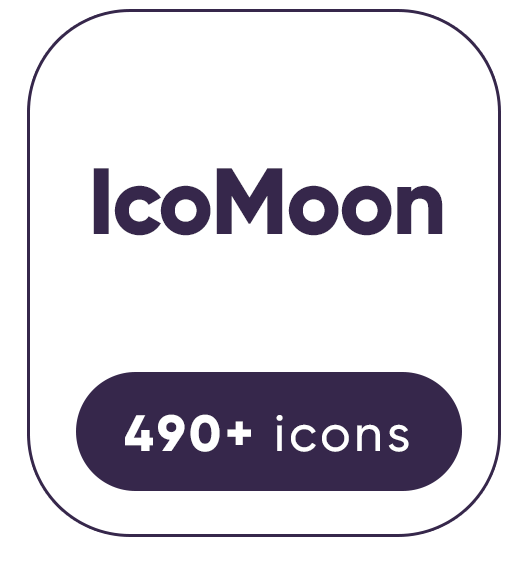
<style>
.page{position:relative;width:523px;height:561px;background:#ffffff}
.page>*{position:absolute;margin:0}
.t1{font:93.8px "Gilroy-ExtraBold";letter-spacing:-0.025em;color:#36274b}
.t2{font:50.9px "Gilroy-Medium";letter-spacing:0.075em;color:#ffffff}
.t3{font:50.9px "Gilroy-ExtraBold";letter-spacing:0.075em;color:#ffffff}
</style>
<div class="page">
<p class="t1" style="left:93px;top:168px;width:350px;height:68px">IcoMoon</p>
<p class="t2" style="left:125px;top:414px;width:284px;height:38px"><span class="t3">490+ </span>icons</p>
</div>
